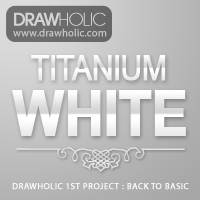
<style>
.page{position:relative;width:200px;height:200px}
.page>*{position:absolute;margin:0}
.t1{font:19px "AvantGardeExtLitITCTT";letter-spacing:-0.06em;color:#d3d3d3;font-weight:bold}
.t2{font:17.8px "AvantGardeITCbyBT-Medium";letter-spacing:-0.06em;color:#d3d3d3;font-weight:bold}
.t3{font:10.4px "MyriadPro-Regular";color:#c4c4c4;font-weight:bold}
.t4{font:34.3px "ArialMT";letter-spacing:-0.05em;color:#ffffff;font-weight:bold;scale:0.89 1}
.t5{font:62.1px "Arial-BoldMT";letter-spacing:-0.03em;color:#ffffff;font-weight:bold;scale:0.88 1}
.t6{font:8.7px "MyriadPro-Regular";letter-spacing:0.04em;color:#ffffff;font-weight:bold}
</style>
<div class="page">
<p class="t1" style="left:14px;top:12px;width:92px;height:14px"><span class="t2">DRAW</span>HOLIC</p>
<p class="t3" style="left:13px;top:28px;width:94px;height:9px">www.drawholic.com</p>
<p class="t4" style="left:31px;top:55px;width:135px;height:26px">TITANIUM</p>
<p class="t5" style="left:12px;top:90px;width:174px;height:46px">WHITE</p>
<p class="t6" style="left:12px;top:183px;width:177px;height:7px">DRAWHOLIC 1ST PROJECT : BACK TO BASIC</p>
</div>
